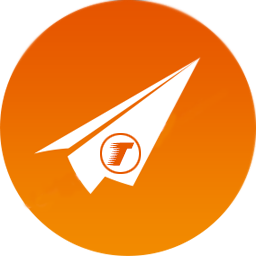
<style>
.page{position:relative;width:256px;height:256px;background:#ffffff}
.page>*{position:absolute;margin:0}
.t1{font:40.6px "Barbatrick";letter-spacing:0.01em;color:#e75900;font-weight:bold}
</style>
<div class="page">
<p class="t1" style="left:106px;top:142px;width:29px;height:24px">T</p>
</div>
